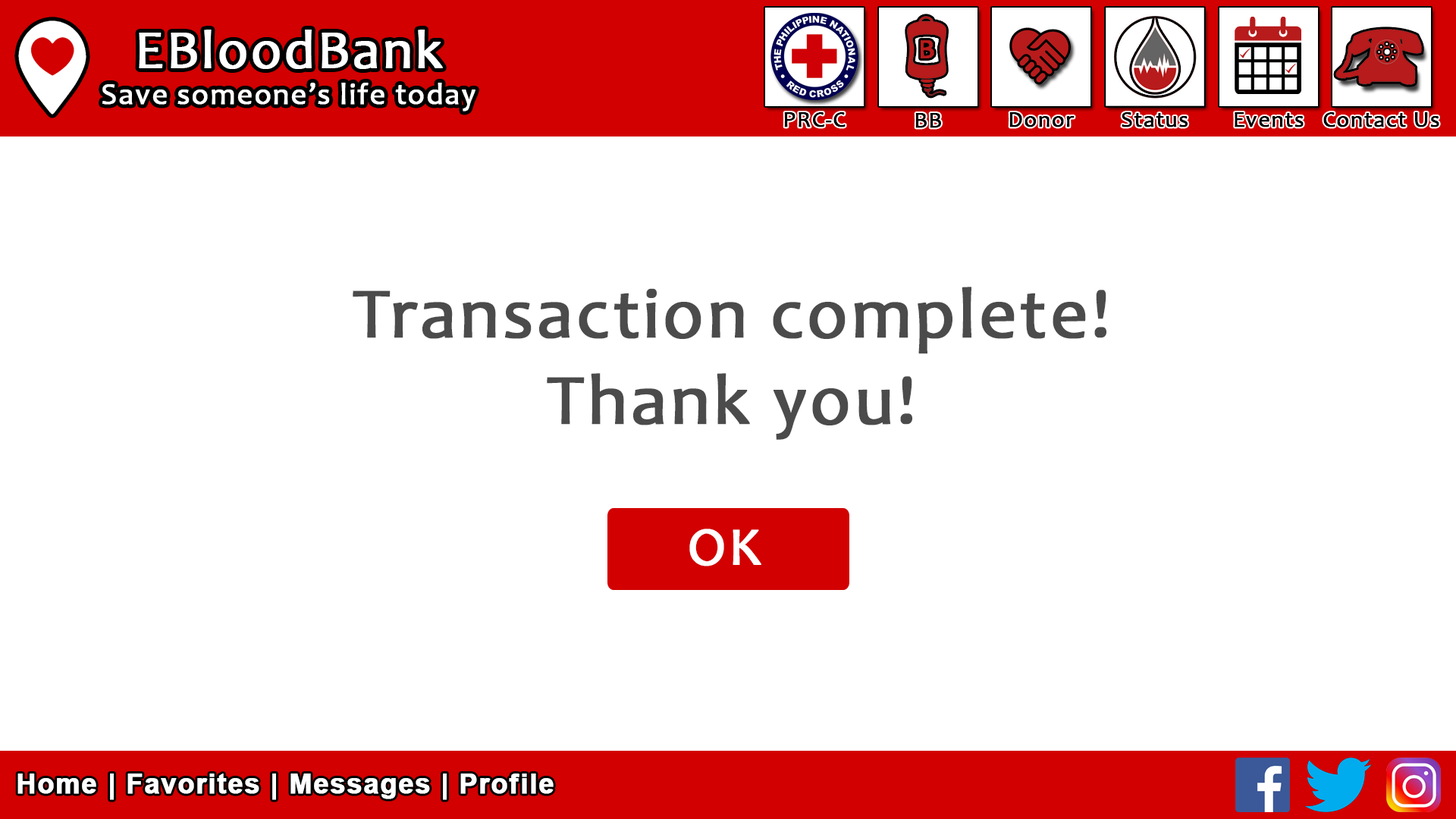
<style>
.page{position:relative;width:1456px;height:819px;background:#ffffff}
.page>*{position:absolute;margin:0}
.t1{font:30.3px "Candara";letter-spacing:0.03em;color:#ffffff;font-weight:bold}
.t2{font:54.6px "Candara";letter-spacing:0.03em;color:#ffffff;font-weight:bold}
.t3{font:22.7px "Candara";letter-spacing:0.03em;color:#000000;font-weight:bold}
.t4{font:72px "Candara";letter-spacing:0.03em;color:#4b4b4b;font-weight:bold}
.t5{font:54.3px "Candara";letter-spacing:0.03em;color:#ffffff;font-weight:bold}
.t6{font:27.3px "Arial-BoldMT";letter-spacing:0.03em;color:#ffffff;font-weight:bold}
</style>
<div class="page">
<p class="t1" style="left:102px;top:30px;width:373px;height:81px;text-align:center"><span class="t2">EBloodBank<br></span>Save someone’s life today</p>
<p class="t3" style="left:784px;top:112px;width:62px;height:15px">PRC-C</p>
<p class="t3" style="left:915px;top:113px;width:26px;height:15px">BB</p>
<p class="t3" style="left:1009px;top:112px;width:66px;height:15px">Donor</p>
<p class="t3" style="left:1122px;top:112px;width:66px;height:15px">Status</p>
<p class="t3" style="left:1235px;top:112px;width:69px;height:15px">Events</p>
<p class="t3" style="left:1323px;top:112px;width:116px;height:15px">Contact Us</p>
<p class="t4" style="left:353px;top:287px;width:753px;height:153px;text-align:center">Transaction complete!<br>Thank you!</p>
<p class="t5" style="left:689px;top:529px;width:72px;height:37px">OK</p>
<p class="t6" style="left:17px;top:773px;width:537px;height:27px">Home | Favorites | Messages | Profile</p>
</div>
